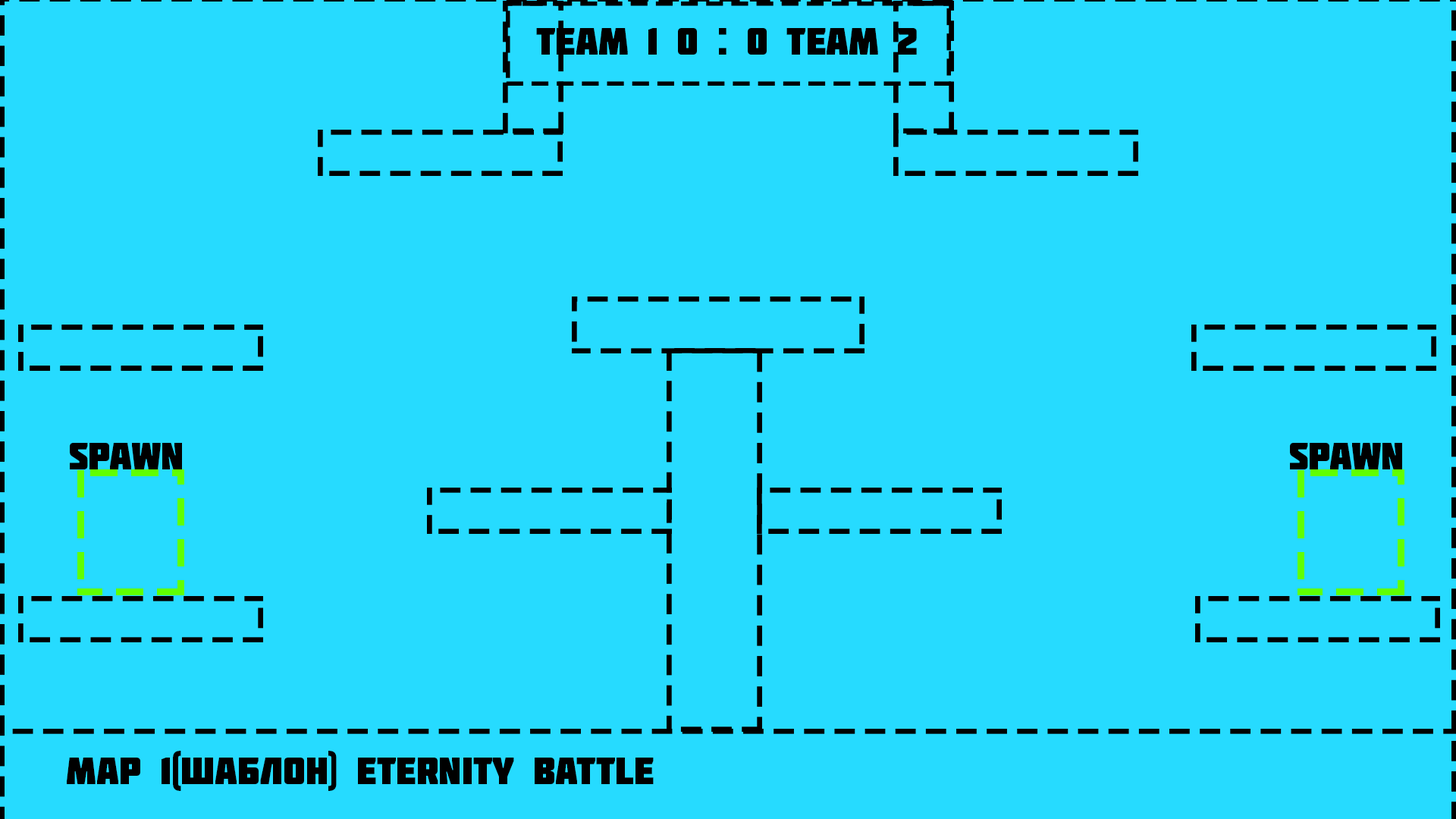
<style>
.page{position:relative;width:1456px;height:819px;background:#26dbff}
.page>*{position:absolute;margin:0}
.t1{font:37.9px "Molot";color:#000000}
</style>
<div class="page">
<p class="t1" style="left:536px;top:28px;width:381px;height:27px">team 1 0 : 0 team 2</p>
<p class="t1" style="left:70px;top:443px;width:112px;height:26px">spawn</p>
<p class="t1" style="left:1290px;top:443px;width:112px;height:26px">spawn</p>
<p class="t1" style="left:67px;top:751px;width:587px;height:40px">map 1(шаблон) eternity battle</p>
</div>
